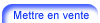
<style>
.page{position:relative;width:100px;height:23px;background:#ffffff}
.page>*{position:absolute;margin:0}
.t1{font:11px "ArialMT";color:#092ff6}
</style>
<div class="page">
<p class="t1" style="left:14px;top:11px;width:75px;height:8px">Mettre en vente</p>
</div>
